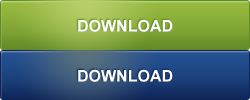
<style>
.page{position:relative;width:250px;height:100px}
.page>*{position:absolute;margin:0}
.t1{font:16px "Arial-BoldMT";color:#ffffff}
</style>
<div class="page">
<p class="t1" style="left:78px;top:19px;width:95px;height:13px">DOWNLOAD</p>
<p class="t1" style="left:78px;top:69px;width:95px;height:13px">DOWNLOAD</p>
</div>
